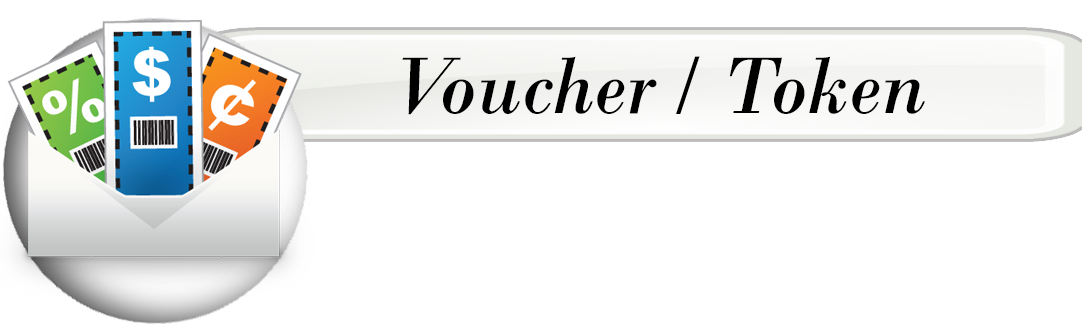
<style>
.page{position:relative;width:1082px;height:325px;background:#ffffff}
.page>*{position:absolute;margin:0}
.t1{font:84.4px "BodoniMT-Italic";color:#000000}
</style>
<div class="page">
<p class="t1" style="left:402px;top:56px;width:523px;height:59px">Voucher / Token</p>
</div>
